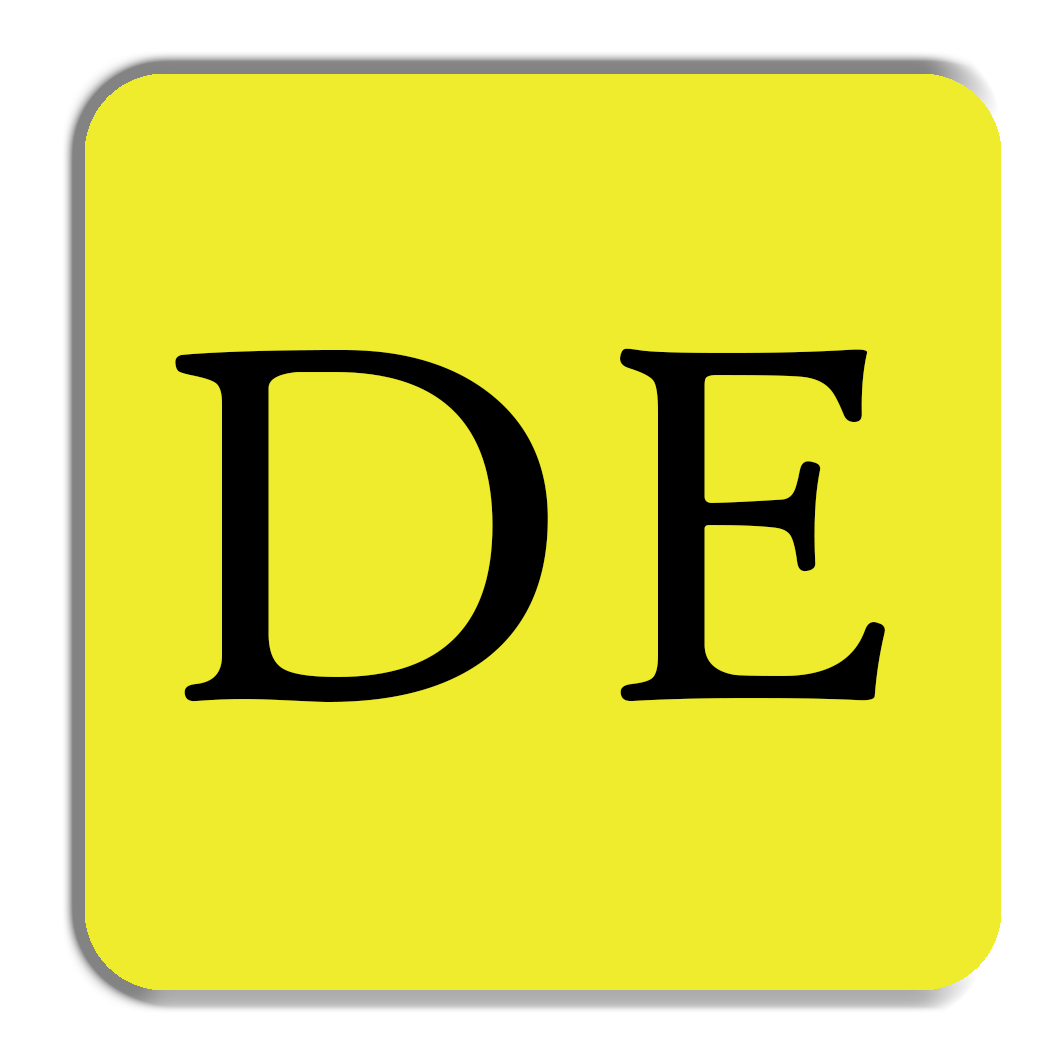
<style>
.page{position:relative;width:1063px;height:1063px;background:#eeec2c}
.page>*{position:absolute;margin:0}
.t1{font:541.7px "HighTowerText-Reg";color:#000000}
</style>
<div class="page">
<p class="t1" style="left:175px;top:348px;width:710px;height:354px">DE</p>
</div>
